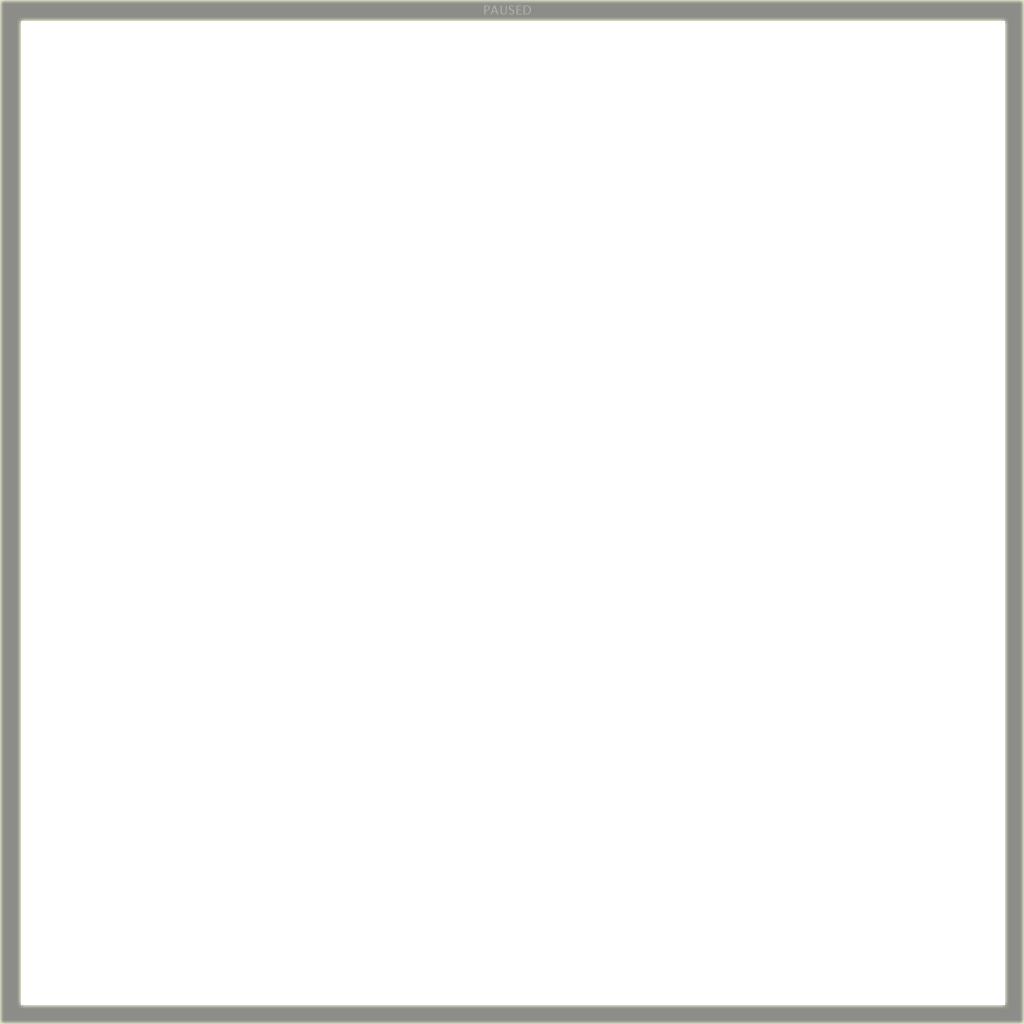
<style>
.page{position:relative;width:1024px;height:1024px;background:#ffffff}
.page>*{position:absolute;margin:0}
.t1{font:12px "LucidaGrande";letter-spacing:0.05em;color:#b2b2aa;text-transform:uppercase}
</style>
<div class="page">
<p class="t1" style="left:484px;top:5px;width:47px;height:10px">PAUSED</p>
</div>
